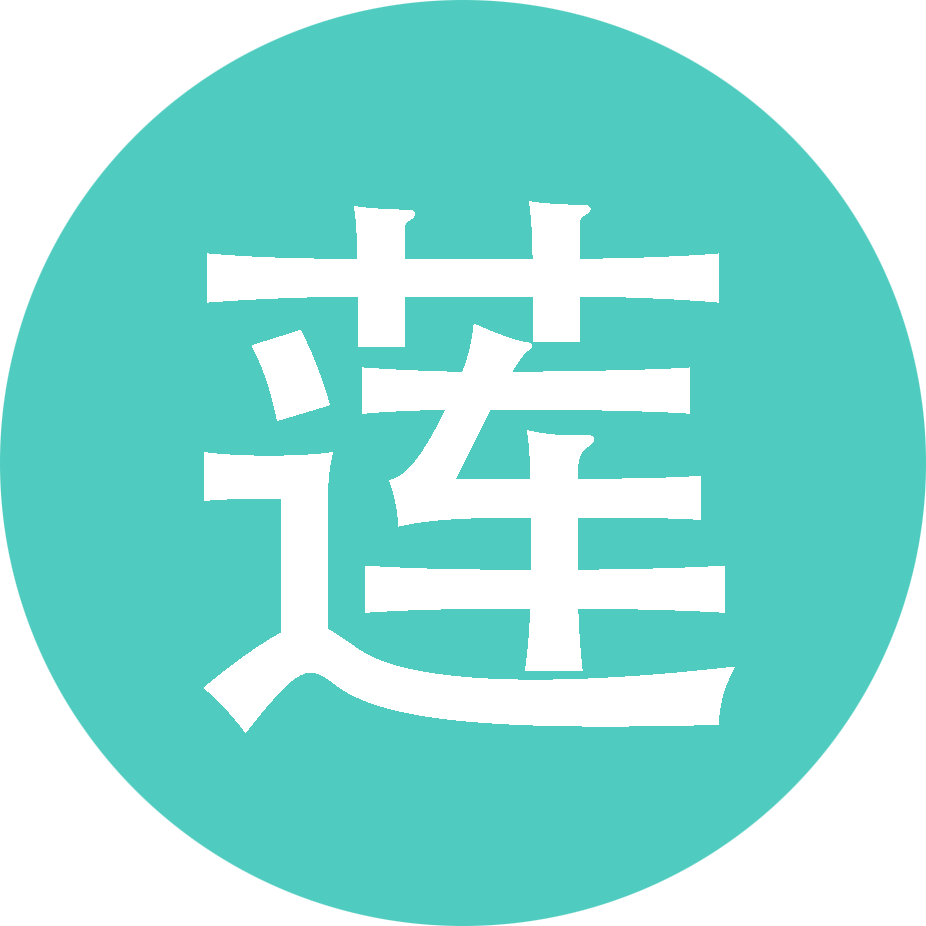
<style>
.page{position:relative;width:926px;height:926px;background:#4fccbf}
.page>*{position:absolute;margin:0}
.t1{font:600.1px "AdobeHeitiStd-Regular";color:#ffffff}
</style>
<div class="page">
<p class="t1" style="left:204px;top:201px;width:531px;height:532px">莲</p>
</div>
